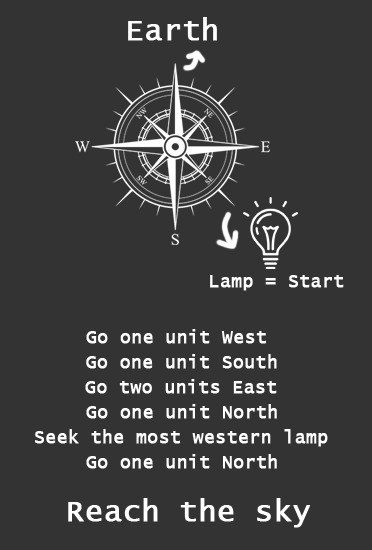
<style>
.page{position:relative;width:372px;height:550px;background:#333333}
.page>*{position:absolute;margin:0}
.t1{font:30px "LucidaConsole";color:#ffffff;font-weight:bold}
.t2{font:18px "LucidaConsole";color:#ffffff;font-weight:bold}
</style>
<div class="page">
<p class="t1" style="left:128px;top:17px;width:89px;height:24px">Earth</p>
<p class="t2" style="left:210px;top:275px;width:134px;height:16px">Lamp = Start</p>
<p class="t2" style="left:86px;top:329px;width:180px;height:15px">Go one unit West</p>
<p class="t2" style="left:86px;top:354px;width:191px;height:15px">Go one unit South</p>
<p class="t2" style="left:85px;top:379px;width:192px;height:15px">Go two units East</p>
<p class="t2" style="left:86px;top:404px;width:191px;height:15px">Go one unit North</p>
<p class="t2" style="left:35px;top:429px;width:293px;height:18px">Seek the most western lamp</p>
<p class="t2" style="left:86px;top:454px;width:191px;height:15px">Go one unit North</p>
<p class="t1" style="left:68px;top:498px;width:242px;height:30px">Reach the sky</p>
</div>
